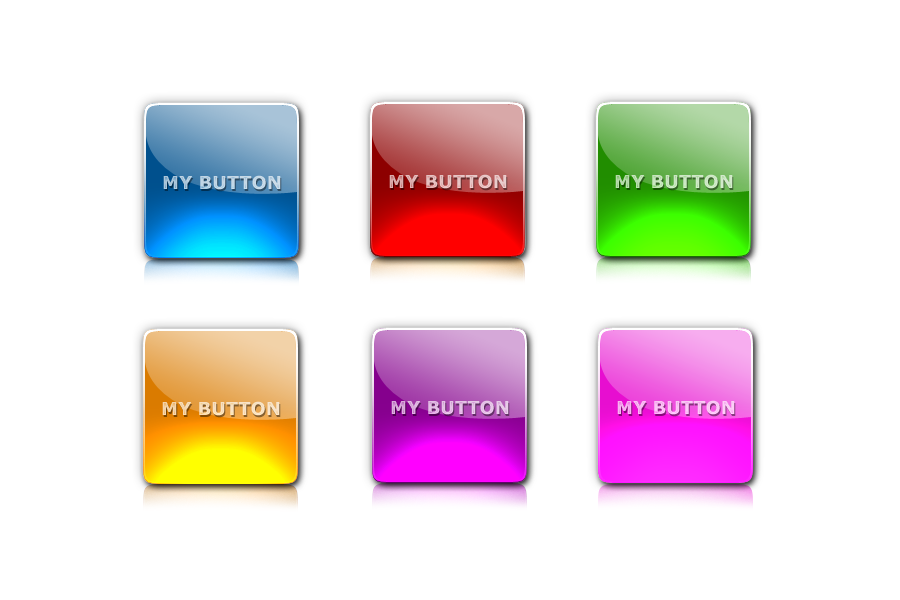
<style>
.page{position:relative;width:900px;height:600px;background:#ffffff}
.page>*{position:absolute;margin:0}
.t1{font:18px "Verdana-Bold";color:#e5c1c1;text-transform:uppercase}
.t2{font:18px "Verdana-Bold";color:#c9e5c1;text-transform:uppercase}
.t3{font:18px "Verdana-Bold";color:#c0d5e5;text-transform:uppercase}
.t4{font:18px "Verdana-Bold";color:#f7e0c0;text-transform:uppercase}
.t5{font:18px "Verdana-Bold";color:#e3c1e5;text-transform:uppercase}
.t6{font:18px "Verdana-Bold";color:#fac4f5;text-transform:uppercase}
</style>
<div class="page">
<p class="t1" style="left:389px;top:174px;width:118px;height:15px">MY BUTTON</p>
<p class="t2" style="left:615px;top:174px;width:118px;height:15px">MY BUTTON</p>
<p class="t3" style="left:163px;top:175px;width:118px;height:15px">MY BUTTON</p>
<p class="t4" style="left:162px;top:401px;width:118px;height:15px">MY BUTTON</p>
<p class="t5" style="left:391px;top:400px;width:118px;height:15px">MY BUTTON</p>
<p class="t6" style="left:617px;top:400px;width:118px;height:15px">MY BUTTON</p>
</div>
